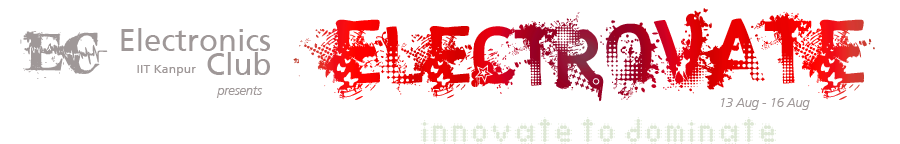
<style>
.page{position:relative;width:900px;height:144px;background:#ffffff}
.page>*{position:absolute;margin:0}
.t1{font:94.2px "trashco"}
.t2{font:30.9px/24.3px "FrutigerCE-Roman";color:#9f9898}
.t3{font:59.5px "pulsesans";color:#9f9898}
.t4{font:12.3px "FrutigerCE-Roman";color:#9f9898}
.t5{font:12.6px "FrutigerCE-LightItalic";color:#9f9898}
.t6{font:12.5px "FrutigerLT-LightItalic";color:#9f9898}
.t7{font:51.8px "crystal-lightning";color:#dde7d4}
</style>
<div class="page">
<p class="t1" style="left:293px;top:8px;width:582px;height:94px">ElectroVATE</p>
<p class="t2" style="left:121px;top:28px;width:149px;height:47px;text-align:right">Electronics<br>Club</p>
<p class="t3" style="left:20px;top:31px;width:88px;height:48px">ec</p>
<p class="t4" style="left:137px;top:65px;width:59px;height:11px">IIT Kanpur</p>
<p class="t5" style="left:216px;top:86px;width:47px;height:12px">presents</p>
<p class="t6" style="left:721px;top:98px;width:89px;height:12px">13 Aug - 16 Aug</p>
<p class="t7" style="left:420px;top:117px;width:356px;height:27px">innovate to dominate</p>
</div>
